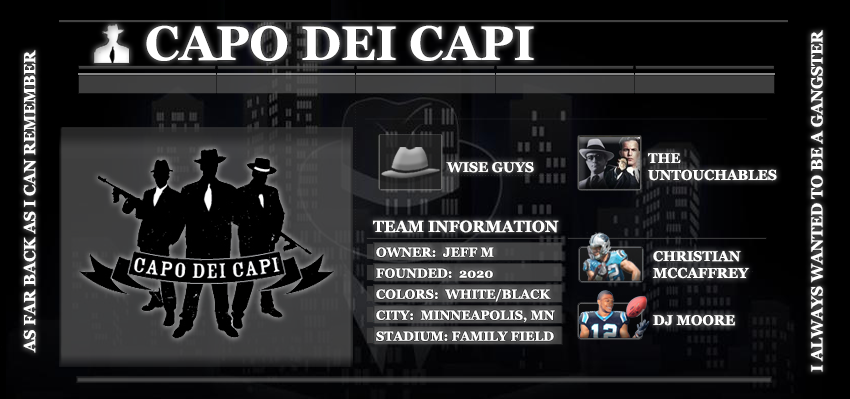
<style>
.page{position:relative;width:850px;height:399px;background:#000000}
.page>*{position:absolute;margin:0}
.t1{font:16px "Georgia-Bold";color:#ffffff}
.t2{font:48px "Georgia-Bold";color:#ffffff}
.t3{font:14px "Georgia-Bold";color:#ffffff}
.t4{font:13px "Georgia-Bold";color:#ffffff}
</style>
<div class="page">
<p class="t1" style="left:23px;top:30px;width:800px;height:342px;text-align:center;rotate:-90deg">AS FAR BACK AS I CAN REMEMBER<br><br><br><br><br><br><br><br><br><br><br><br><br><br><br><br><br><br><br><br><br><br><br><br><br><br><br><br><br><br><br><br><br><br><br><br><br><br><br><br><br>I ALWAYS WANTED TO BE A GANGSTER</p>
<p class="t2" style="left:146px;top:25px;width:388px;height:36px">CAPO DEI CAPI</p>
<p class="t3" style="left:648px;top:153px;width:129px;height:28px">THE<br>UNTOUCHABLES</p>
<p class="t3" style="left:446px;top:162px;width:88px;height:11px">WISE GUYS</p>
<p class="t1" style="left:373px;top:220px;width:186px;height:13px">TEAM INFORMATION</p>
<p class="t4" style="left:376px;top:247px;width:118px;height:10px">OWNER:  JEFF M</p>
<p class="t3" style="left:653px;top:251px;width:96px;height:28px">CHRISTIAN<br>MCCAFFREY</p>
<p class="t4" style="left:376px;top:268px;width:117px;height:10px">FOUNDED:  2020</p>
<p class="t4" style="left:376px;top:289px;width:175px;height:13px">COLORS:  WHITE/BLACK</p>
<p class="t4" style="left:376px;top:310px;width:179px;height:13px">CITY:  MINNEAPOLIS, MN</p>
<p class="t3" style="left:653px;top:315px;width:82px;height:11px">DJ MOORE</p>
<p class="t4" style="left:376px;top:331px;width:178px;height:10px">STADIUM: FAMILY FIELD</p>
</div>
